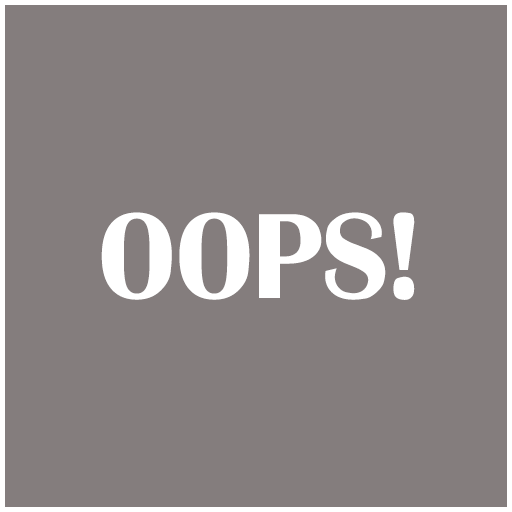
<style>
.page{position:relative;width:512px;height:512px;background:#847d7d}
.page>*{position:absolute;margin:0}
.t1{font:116.2px "Grenoble-Bold";color:#ffffff}
</style>
<div class="page">
<p class="t1" style="left:101px;top:212px;width:314px;height:88px">OOPS!</p>
</div>
